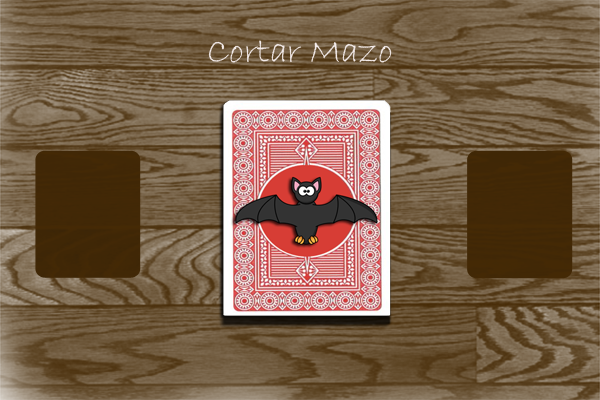
<style>
.page{position:relative;width:600px;height:400px}
.page>*{position:absolute;margin:0}
.t1{font:36px "BradleyHandITC";color:#f3ebea}
</style>
<div class="page">
<p class="t1" style="left:208px;top:40px;width:184px;height:23px">Cortar Mazo</p>
</div>
